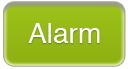
<style>
.page{position:relative;width:128px;height:69px}
.page>*{position:absolute;margin:0}
.t1{font:28.1px "Helvetica";color:#ffffff}
</style>
<div class="page">
<p class="t1" style="left:28px;top:23px;width:72px;height:20px">Alarm</p>
</div>
